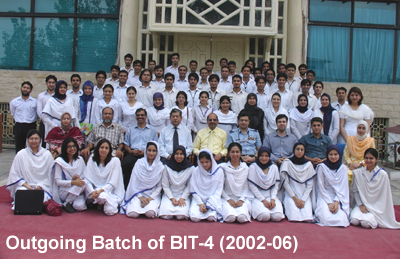
<style>
.page{position:relative;width:400px;height:259px}
.page>*{position:absolute;margin:0}
.t1{font:18.2px "Arial-BoldMT";color:#ffffff}
</style>
<div class="page">
<p class="t1" style="left:6px;top:235px;width:292px;height:18px">Outgoing Batch of BIT-4 (2002-06)</p>
</div>
